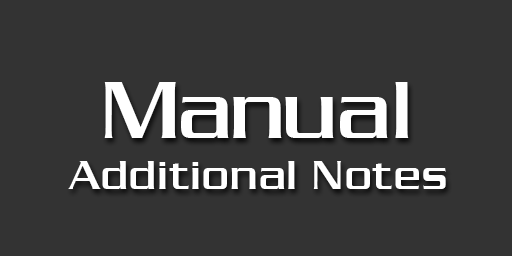
<style>
.page{position:relative;width:512px;height:256px;background:#333333}
.page>*{position:absolute;margin:0}
.t1{font:90px "ChaneyNormal";letter-spacing:-0.025em;color:#ffffff}
.t2{font:90px "ChaneyNormal";color:#ffffff}
.t3{font:45px "ChaneyNormal";letter-spacing:0.025em;color:#ffffff}
</style>
<div class="page">
<p class="t1" style="left:104px;top:82px;width:305px;height:56px">Man<span class="t2">ual</span></p>
<p class="t3" style="left:68px;top:161px;width:378px;height:28px">Additional Notes</p>
</div>
